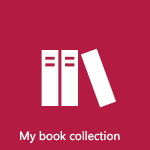
<style>
.page{position:relative;width:150px;height:150px;background:#b31b42}
.page>*{position:absolute;margin:0}
.t1{font:12px "SegoeUI";color:#ffffff}
</style>
<div class="page">
<p class="t1" style="left:20px;top:131px;width:100px;height:12px">My book collection</p>
</div>
